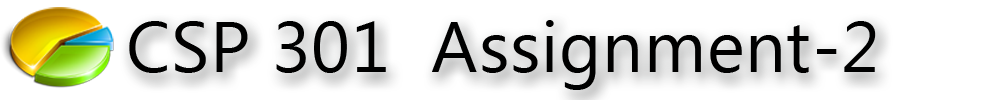
<style>
.page{position:relative;width:1000px;height:100px;background:#ffffff}
.page>*{position:absolute;margin:0}
.t1{font:72px "Ebrima";letter-spacing:0.01em;color:#000000}
</style>
<div class="page">
<p class="t1" style="left:129px;top:20px;width:747px;height:70px">CSP 301  Assignment-2</p>
</div>
